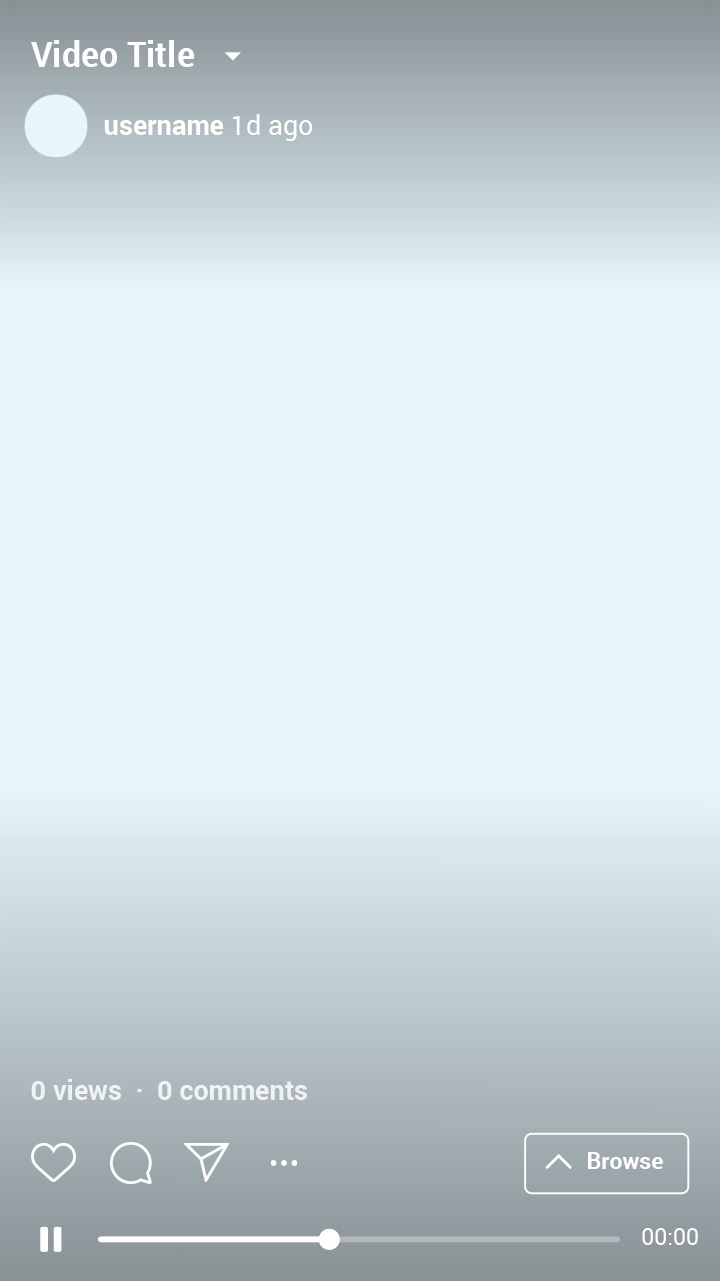
<style>
.page{position:relative;width:720px;height:1281px;background:#e6f6fc}
.page>*{position:absolute;margin:0}
.t1{font:35px "Roboto-Bold";color:#ffffff}
.t2{font:27px "Roboto-Bold";color:#ffffff}
.t3{font:27px "Roboto-Regular";color:#ffffff}
.t4{font:23px "Roboto-Bold";color:#ffffff}
.t5{font:23px "Roboto-Regular";color:#ffffff}
</style>
<div class="page">
<p class="t1" style="left:31px;top:40px;width:163px;height:27px">Video Title</p>
<p class="t2" style="left:104px;top:114px;width:208px;height:27px">username<span class="t3"> 1d ago</span></p>
<p class="t2" style="left:31px;top:1079px;width:276px;height:21px;opacity:0.8">0 views  ·  0 comments</p>
<p class="t4" style="left:588px;top:1152px;width:75px;height:17px">Browse</p>
<p class="t5" style="left:642px;top:1228px;width:56px;height:17px">00:00</p>
</div>
